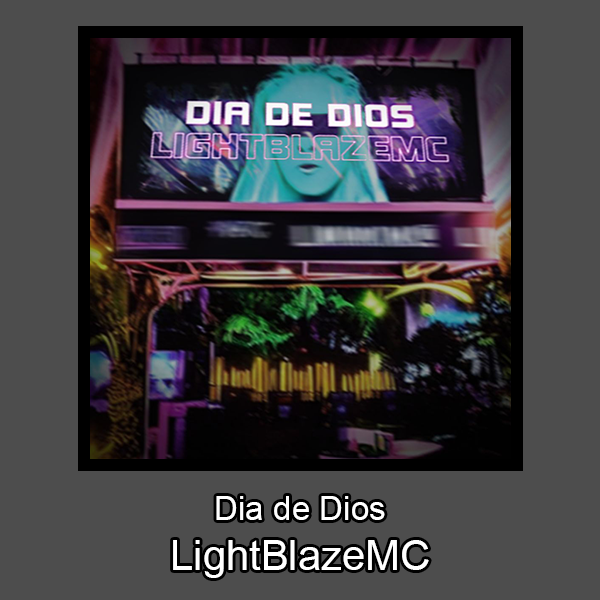
<style>
.page{position:relative;width:600px;height:600px;background:#4d4d4d}
.page>*{position:absolute;margin:0}
.t1{font:41.7px "ArialMT";color:#ffffff}
.t2{font:33.3px "ArialMT";color:#ffffff}
</style>
<div class="page">
<p class="t1" style="left:173px;top:496px;width:256px;height:82px;text-align:center"><span class="t2">Dia de Dios<br></span>LightBlazeMC</p>
</div>
